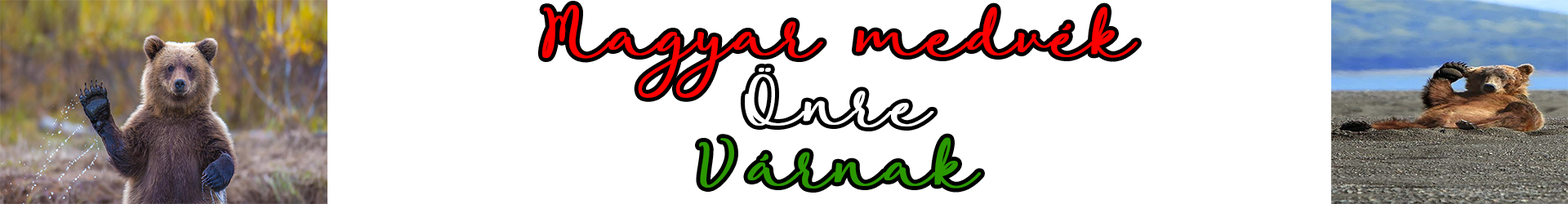
<style>
.page{position:relative;width:1568px;height:204px;background:#ffffff}
.page>*{position:absolute;margin:0}
.t1{font:56.6px "RoseOfBaltimore";color:#ff0000;font-weight:bold}
.t2{font:56.6px "RoseOfBaltimore";color:#2b9800;font-weight:bold}
</style>
<div class="page">
<p class="t1" style="left:542px;top:5px;width:596px;height:93px">Magyar medvék</p>
<p class="t2" style="left:699px;top:137px;width:282px;height:52px">Várnak</p>
</div>
